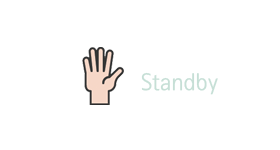
<style>
.page{position:relative;width:280px;height:150px;background:#ffffff}
.page>*{position:absolute;margin:0}
.t1{font:24px "SeN-CM";color:#c6dfd6}
</style>
<div class="page">
<p class="t1" style="left:141px;top:72px;width:77px;height:23px">Standby</p>
</div>
